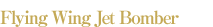
<style>
.page{position:relative;width:213px;height:27px;background:#ffffff}
.page>*{position:absolute;margin:0}
.t1{font:18px "RyuminPro-ExBold";letter-spacing:-0.08em;color:#c4a956}
</style>
<div class="page">
<p class="t1" style="left:0px;top:10px;width:179px;height:17px">Flying Wing Jet Bomber</p>
</div>
